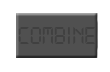
<style>
.page{position:relative;width:110px;height:72px;background:#ffffff}
.page>*{position:absolute;margin:0}
.t1{font:26px "DS-Digital";letter-spacing:-0.025em;color:#404040}
</style>
<div class="page">
<p class="t1" style="left:18px;top:27px;width:78px;height:17px">combine</p>
</div>
